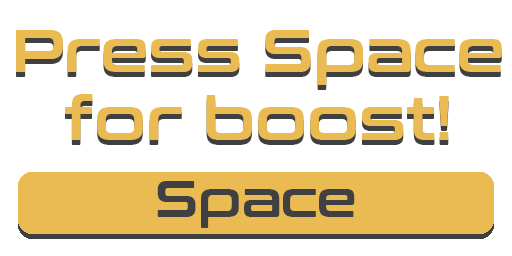
<style>
.page{position:relative;width:512px;height:256px;background:#ffffff}
.page>*{position:absolute;margin:0}
.t1{font:60px/100px "ConthraxSb-Regular";color:#e9bb52}
.t2{font:50px "ConthraxSb-Regular";color:#404040}
</style>
<div class="page">
<p class="t1" style="left:16px;top:30px;width:486px;height:110px;text-align:center">Press Space<br>for boost!</p>
<p class="t2" style="left:157px;top:181px;width:198px;height:47px">Space</p>
</div>
